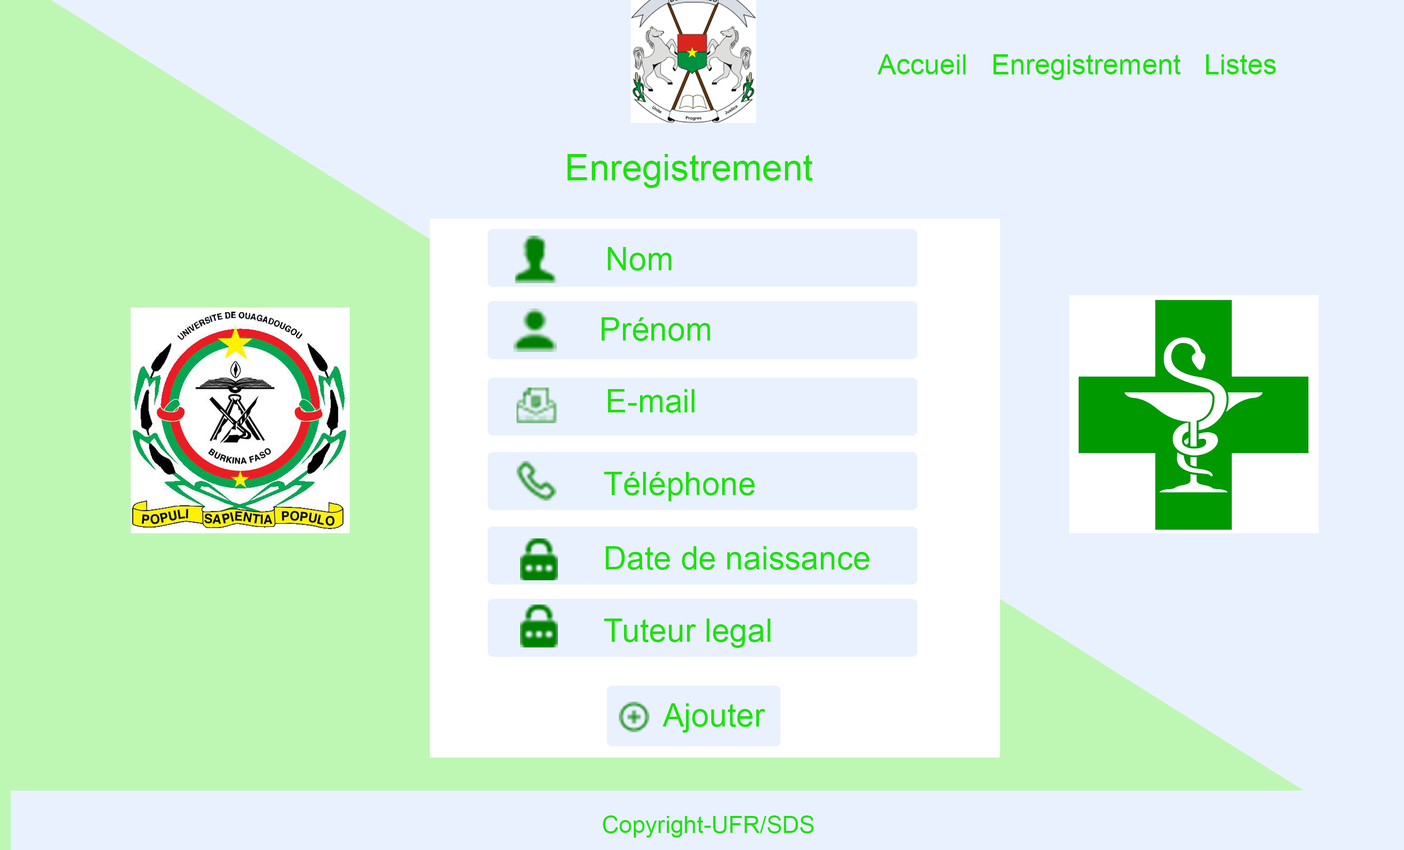
<style>
.page{position:relative;width:1404px;height:850px;background:#e9f1fe}
.page>*{position:absolute;margin:0}
.t1{font:28px "ArialMT";color:#1ee00f}
.t2{font:36.6px "ArialMT";color:#1ee00f}
.t3{font:32.3px "ArialMT";color:#1ee00f}
.t4{font:23.7px "ArialMT";color:#1ee00f}
</style>
<div class="page">
<p class="t1" style="left:877px;top:54px;width:399px;height:26px">Accueil   Enregistrement   Listes</p>
<p class="t2" style="left:567px;top:154px;width:246px;height:34px">Enregistrement</p>
<p class="t3" style="left:607px;top:247px;width:64px;height:24px">Nom</p>
<p class="t3" style="left:601px;top:317px;width:109px;height:24px">Prénom</p>
<p class="t3" style="left:607px;top:389px;width:88px;height:24px">E-mail</p>
<p class="t3" style="left:604px;top:471px;width:151px;height:30px">Téléphone</p>
<p class="t3" style="left:605px;top:546px;width:264px;height:24px">Date de naissance</p>
<p class="t3" style="left:604px;top:618px;width:167px;height:30px">Tuteur legal</p>
<p class="t3" style="left:662px;top:703px;width:103px;height:29px">Ajouter</p>
<p class="t4" style="left:603px;top:815px;width:211px;height:22px">Copyright-UFR/SDS</p>
</div>
